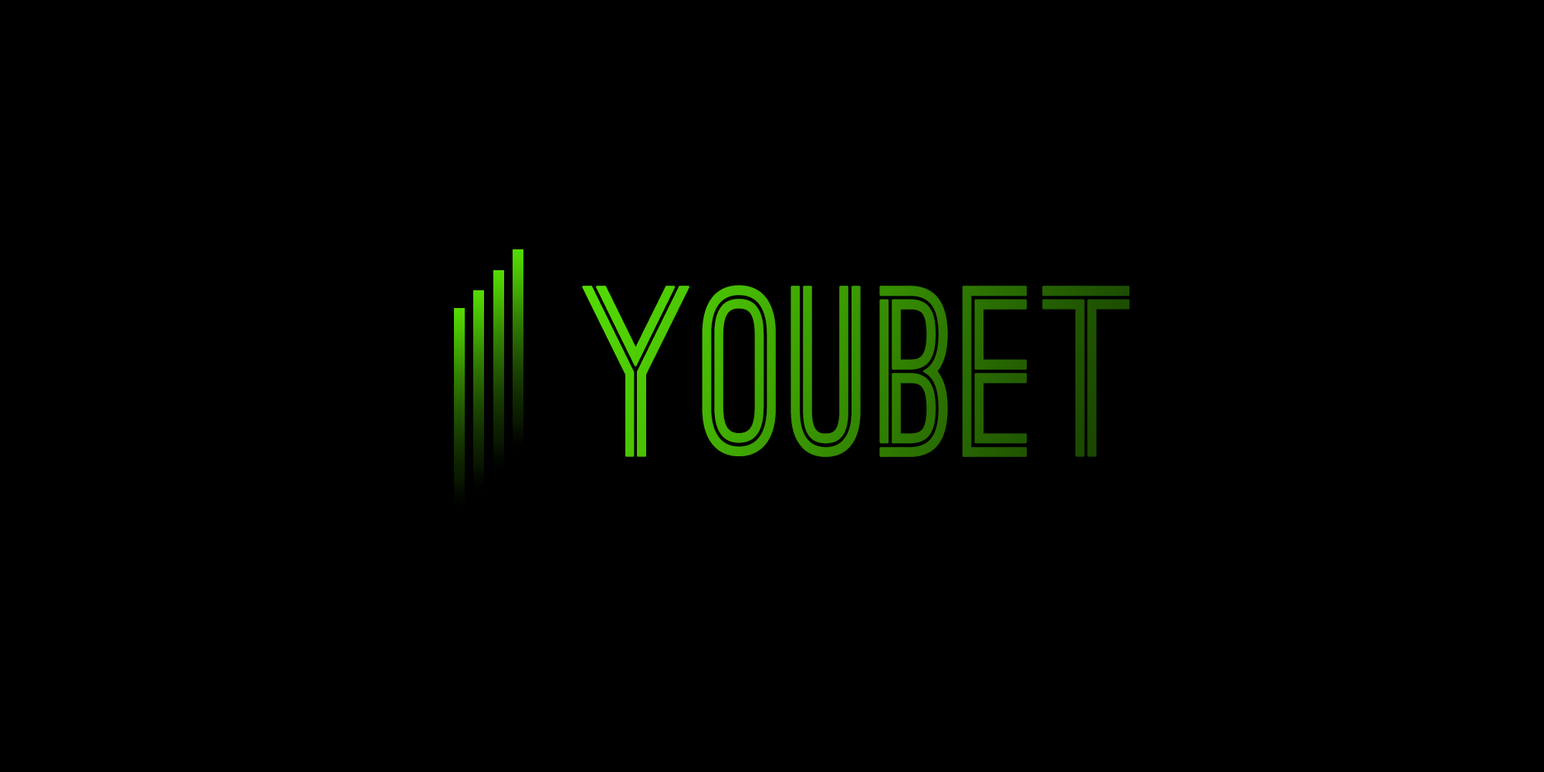
<style>
.page{position:relative;width:1544px;height:772px;background:#000000}
.page>*{position:absolute;margin:0}
.t1{font:229.7px "OstrichSans-Bold";font-weight:bold;scale:0.89 1}
</style>
<div class="page">
<p class="t1" style="left:582px;top:285px;width:548px;height:172px">YOUBET</p>
</div>
